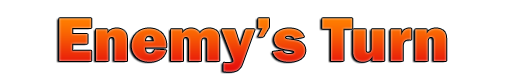
<style>
.page{position:relative;width:512px;height:83px;background:#ffffff}
.page>*{position:absolute;margin:0}
.t1{font:64px "FranklinGothic-Heavy"}
</style>
<div class="page">
<p class="t1" style="left:59px;top:18px;width:388px;height:54px">Enemy’s Turn</p>
</div>
